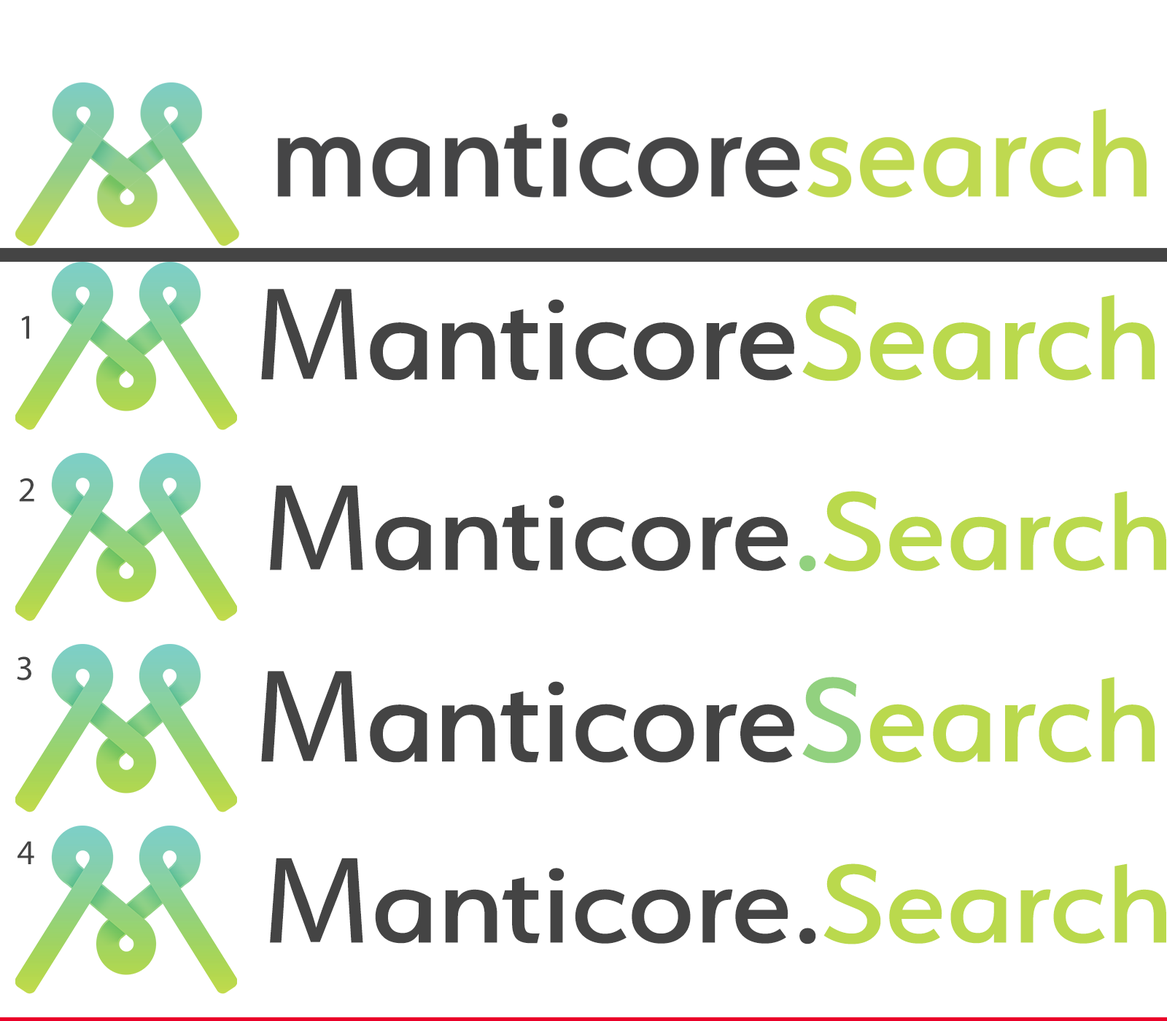
<style>
.page{position:relative;width:1167px;height:1021px;background:#ffffff}
.page>*{position:absolute;margin:0}
.t1{font:134.3px "Serenity-Medium";color:#444444;scale:1.03 1}
.t2{font:134.3px "MyriadPro-Regular";color:#444444;scale:1.03 1}
.t3{font:134.3px "Serenity-Medium";color:#bad94d;scale:1.03 1}
.t4{font:35px "MyriadPro-Regular";color:#444444}
.t5{font:124.9px "Serenity-Medium";color:#444444;scale:1.08 1}
.t6{font:124.9px "MyriadPro-Regular";color:#444444;scale:1.08 1}
.t7{font:124.9px "MyriadPro-Regular";color:#92d17f;scale:1.08 1}
.t8{font:124.9px "Serenity-Medium";color:#bad94d;scale:1.08 1}
.t9{font:134.3px "Serenity-Medium";color:#92d17f;scale:1.03 1}
</style>
<div class="page">
<p class="t1" style="left:261px;top:289px;width:895px;height:93px"><span class="t2">M</span>anticore<span class="t3">Search</span></p>
<p class="t4" style="left:21px;top:316px;width:8px;height:23px">1</p>
<p class="t4" style="left:19px;top:478px;width:15px;height:24px">2</p>
<p class="t5" style="left:270px;top:485px;width:897px;height:87px"><span class="t6">M</span>anticore<span class="t7">.</span><span class="t8">Search</span></p>
<p class="t4" style="left:17px;top:657px;width:14px;height:24px">3</p>
<p class="t1" style="left:261px;top:671px;width:895px;height:93px"><span class="t2">M</span>anticore<span class="t9">S</span><span class="t3">earch</span></p>
<p class="t4" style="left:18px;top:841px;width:16px;height:24px">4</p>
<p class="t5" style="left:270px;top:858px;width:897px;height:87px"><span class="t6">M</span>anticore<span class="t6">.</span><span class="t8">Search</span></p>
</div>
